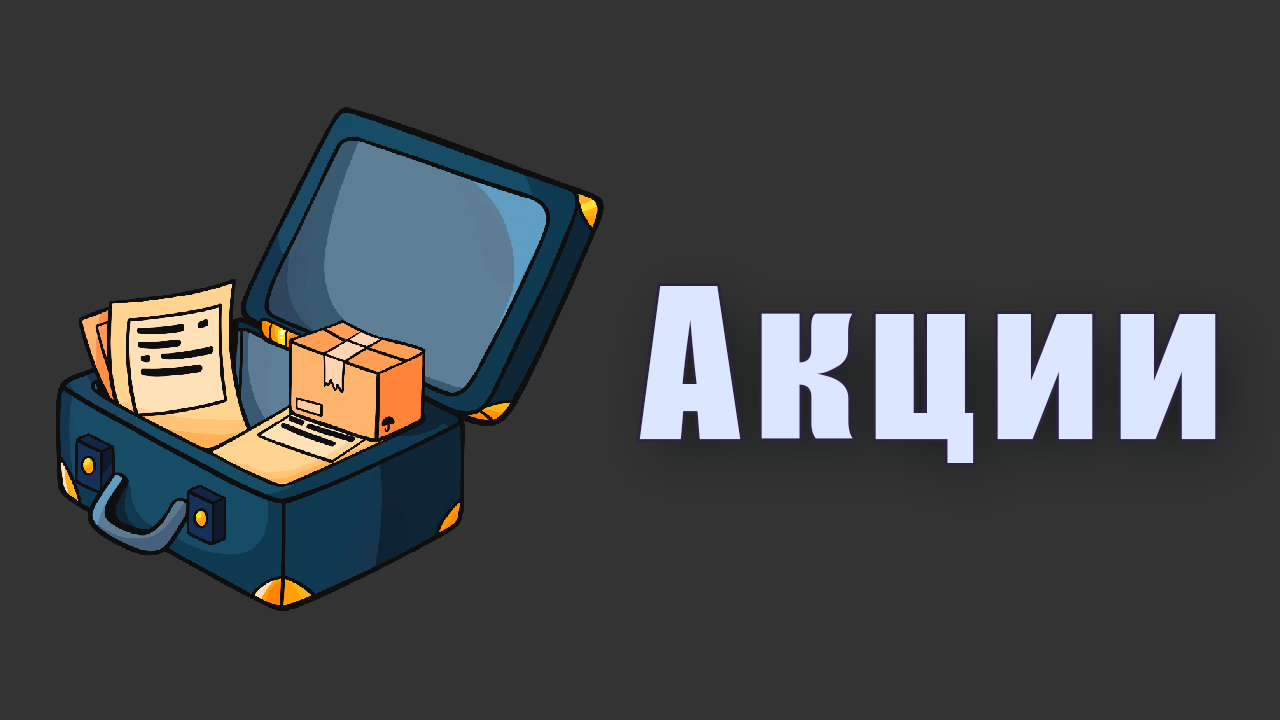
<style>
.page{position:relative;width:1280px;height:720px;background:#333333}
.page>*{position:absolute;margin:0}
.t1{font:193px "Impact";letter-spacing:0.08em;color:#dde6ff}
</style>
<div class="page">
<p class="t1" style="left:639px;top:286px;width:577px;height:177px">Акции</p>
</div>
